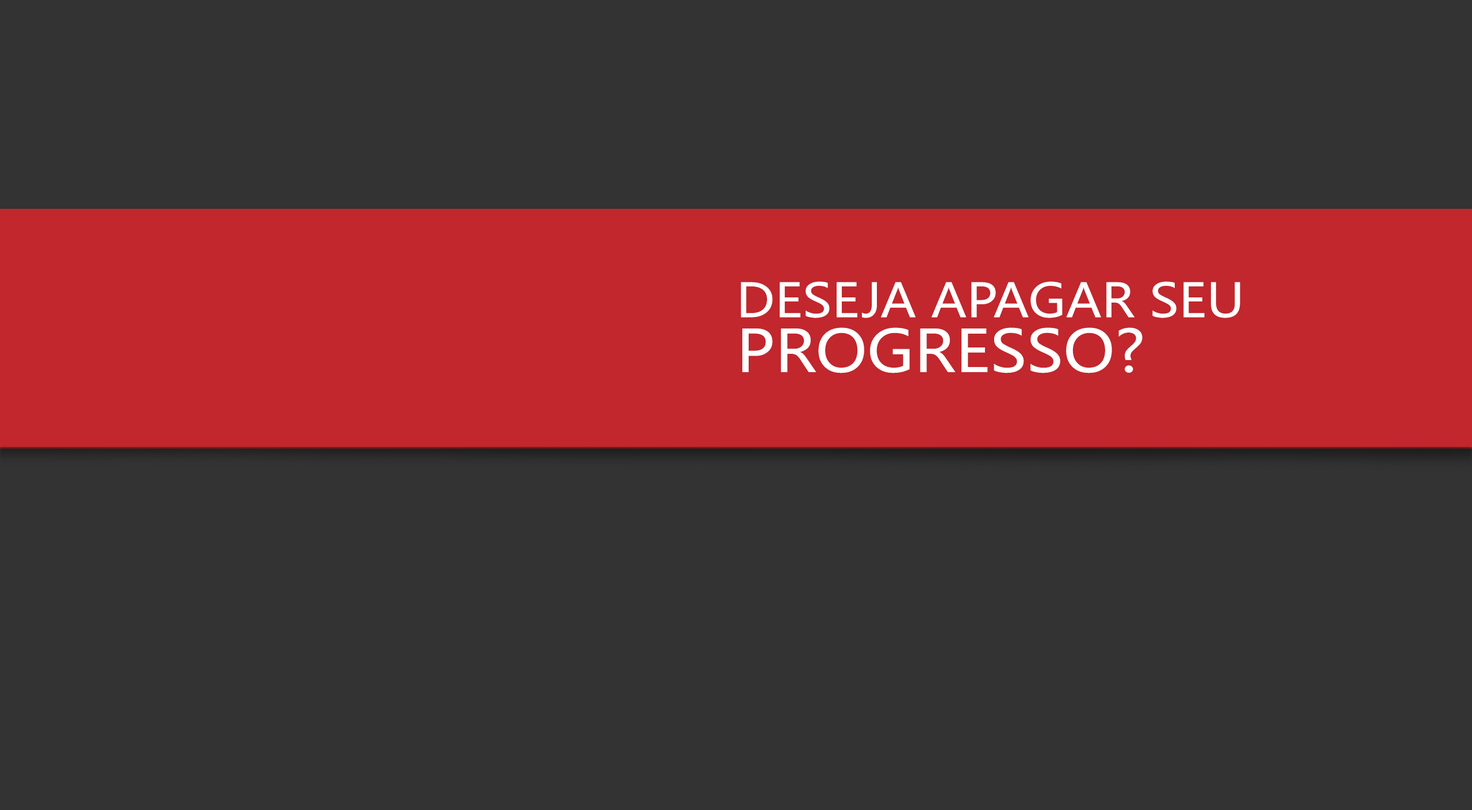
<style>
.page{position:relative;width:1472px;height:810px;background:#333333}
.page>*{position:absolute;margin:0}
.t1{font:46px/54.9px "MicrosoftYaHei";color:#ffffff;scale:1.1 1}
.t2{font:57.5px/54.9px "MicrosoftYaHei";color:#ffffff;scale:1.1 1}
</style>
<div class="page">
<p class="t1" style="left:741px;top:281px;width:500px;height:92px">DESEJA APAGAR SEU<br><span class="t2">PROGRESSO?</span></p>
</div>
